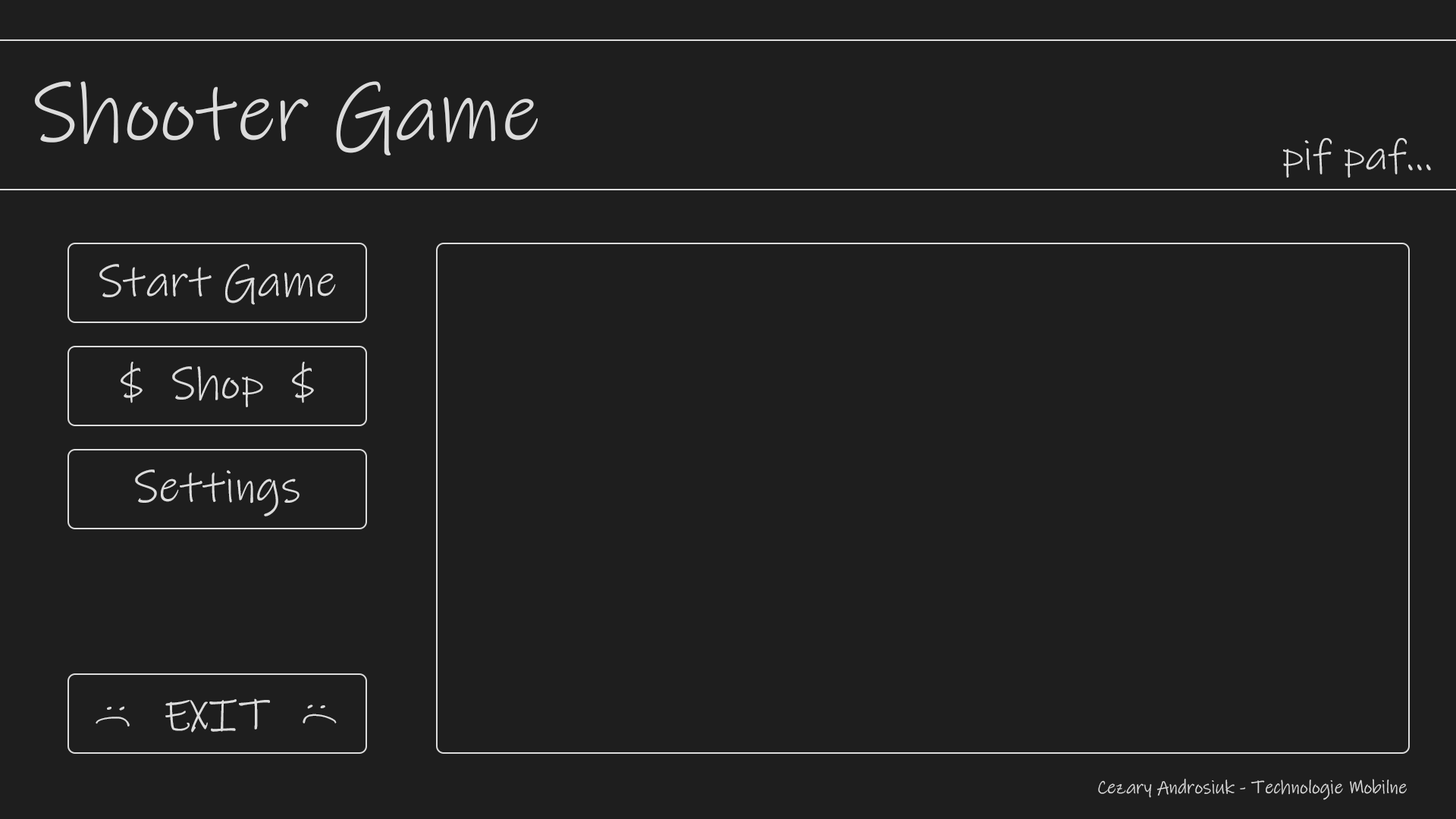
<style>
.page{position:relative;width:1456px;height:819px;background:#1e1e1e}
.page>*{position:absolute;margin:0}
.t1{font:83.4px "InkFree";color:#dcdcdc}
.t2{font:42.5px "InkFree";color:#dcdcdc}
.t3{font:45.5px "InkFree";color:#dcdcdc}
.t4{font:36.6px "InkFree";color:#dcdcdc}
.t5{font:19px "InkFree";color:#dcdcdc}
</style>
<div class="page">
<p class="t1" style="left:34px;top:81px;width:504px;height:74px">Shooter Game</p>
<p class="t2" style="left:1283px;top:138px;width:148px;height:40px">pif paf...</p>
<p class="t3" style="left:99px;top:264px;width:237px;height:41px">Start Game</p>
<p class="t3" style="left:121px;top:362px;width:193px;height:45px">$  Shop  $</p>
<p class="t3" style="left:135px;top:469px;width:165px;height:47px">Settings</p>
<p class="t3" style="left:165px;top:698px;width:105px;height:35px">EXIT</p>
<p class="t4" style="left:96px;top:706px;width:34px;height:20px;rotate:-90deg">):</p>
<p class="t4" style="left:303px;top:704px;width:34px;height:19px;rotate:90deg">:(</p>
<p class="t5" style="left:1098px;top:778px;width:309px;height:22px">Cezary Androsiuk - Technologie Mobilne</p>
</div>
